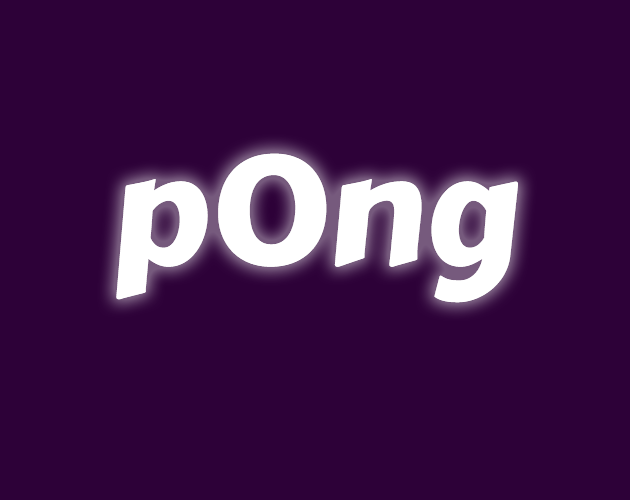
<style>
.page{position:relative;width:630px;height:500px;background:#2d0138}
.page>*{position:absolute;margin:0}
.t1{font:150px "CarterOne";color:#ffffff}
</style>
<div class="page">
<p class="t1" style="left:116px;top:153px;width:402px;height:150px">p0ng</p>
</div>
